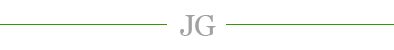
<style>
.page{position:relative;width:394px;height:50px;background:#ffffff}
.page>*{position:absolute;margin:0}
.t1{font:30px "Georgia";letter-spacing:-0.05em;color:#a1a1a1}
</style>
<div class="page">
<p class="t1" style="left:180px;top:15px;width:36px;height:21px">JG</p>
</div>
